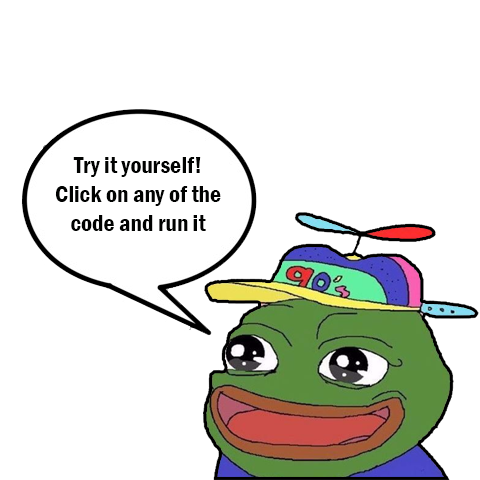
<style>
.page{position:relative;width:480px;height:480px;background:#ffffff}
.page>*{position:absolute;margin:0}
.t1{font:24px "FranklinGothic-DemiCond";color:#010201}
</style>
<div class="page">
<p class="t1" style="left:55px;top:157px;width:166px;height:74px;text-align:center">Try it yourself! Click on any of the code and run it</p>
</div>
